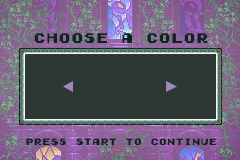
<style>
.page{position:relative;width:240px;height:160px;background:#2d3834}
.page>*{position:absolute;margin:0}
.t1{font:12.5px "GamegirlClassic";color:#0a271c}
.t2{font:8.3px "GamegirlClassic";color:#0a271c}
</style>
<div class="page">
<p class="t1" style="left:34px;top:33px;width:174px;height:10px">CHOOSE A COLOR</p>
<p class="t2" style="left:26px;top:138px;width:190px;height:7px">PRESS START TO CONTINUE</p>
</div>
